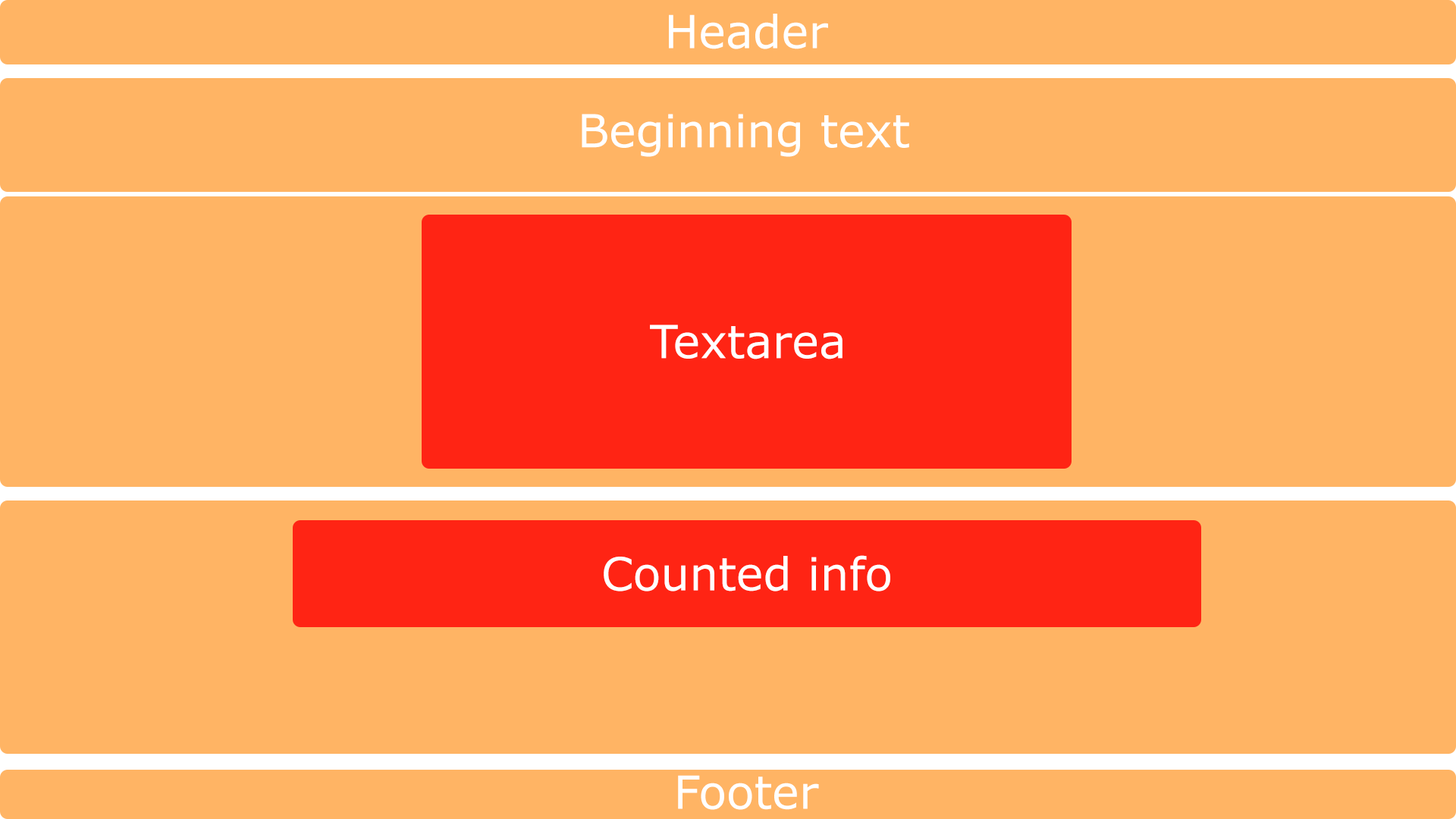
<style>
.page{position:relative;width:1456px;height:819px;background:#ffb464}
.page>*{position:absolute;margin:0}
.t1{font:45.5px "MSReferenceSansSerif";color:#ffffff}
</style>
<div class="page">
<p class="t1" style="left:669px;top:14px;width:159px;height:35px">Header</p>
<p class="t1" style="left:582px;top:114px;width:327px;height:43px">Beginning text</p>
<p class="t1" style="left:650px;top:325px;width:192px;height:34px">Textarea</p>
<p class="t1" style="left:604px;top:555px;width:286px;height:36px">Counted info</p>
<p class="t1" style="left:678px;top:775px;width:141px;height:35px">Footer</p>
</div>
